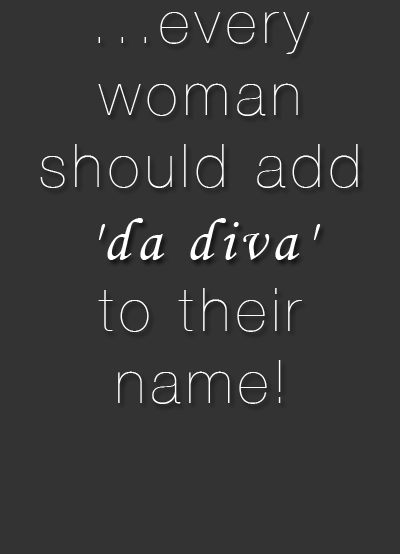
<style>
.page{position:relative;width:400px;height:554px;background:#333333}
.page>*{position:absolute;margin:0}
.t1{font:60px "HelveticaNeue-UltraLight";letter-spacing:0.1em;color:#ffffff}
.t2{font:60px "MonotypeCorsiva";letter-spacing:0.1em;color:#ffffff}
</style>
<div class="page">
<p class="t1" style="left:40px;top:12px;width:318px;height:392px;text-align:center">...every woman should add <br><span class="t2">'da diva'</span> <br>to their name!</p>
</div>
